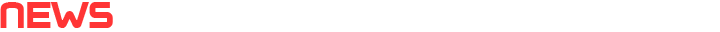
<style>
.page{position:relative;width:720px;height:32px;background:#ffffff}
.page>*{position:absolute;margin:0}
.t1{font:30px "BoomBox";color:#ff3535}
</style>
<div class="page">
<p class="t1" style="left:0px;top:2px;width:113px;height:26px">News</p>
</div>
